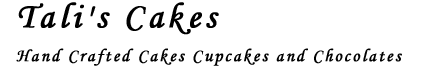
<style>
.page{position:relative;width:432px;height:70px;background:#ffffff}
.page>*{position:absolute;margin:0}
.t1{font:18px "MonotypeCorsiva";letter-spacing:0.1em;color:#000000;font-weight:bold}
.t2{font:36px "MonotypeCorsiva";letter-spacing:0.1em;color:#000000;font-weight:bold}
</style>
<div class="page">
<p class="t1" style="left:16px;top:2px;width:386px;height:64px;text-align:right"><span class="t2">Tali's Cakes               <br>             <br></span>Hand Crafted Cakes Cupcakes and Chocolates</p>
</div>
